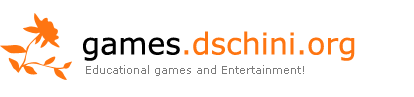
<style>
.page{position:relative;width:414px;height:97px;background:#ffffff}
.page>*{position:absolute;margin:0}
.t1{font:30px "Verdana";color:#fe7511}
.t2{font:30px "Verdana";color:#000000}
.t3{font:11px "Verdana";color:#7c7c7c}
</style>
<div class="page">
<p class="t1" style="left:83px;top:31px;width:272px;height:30px"><span class="t2">games</span>.dschini.org</p>
<p class="t3" style="left:86px;top:65px;width:218px;height:11px">Educational games and Entertainment!</p>
</div>
